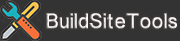
<style>
.page{position:relative;width:180px;height:41px;background:#333333}
.page>*{position:absolute;margin:0}
.t1{font:20.2px "ArialMT";letter-spacing:0.075em;color:#fef8f8;font-weight:bold}
</style>
<div class="page">
<p class="t1" style="left:46px;top:13px;width:131px;height:16px">BuildSiteTools</p>
</div>
